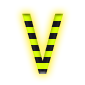
<style>
.page{position:relative;width:85px;height:85px;background:#ffffff}
.page>*{position:absolute;margin:0}
.t1{font:85px "Bahnschrift";scale:0.87 1}
</style>
<div class="page">
<p class="t1" style="left:22px;top:13px;width:42px;height:61px">V</p>
</div>
